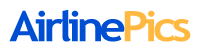
<style>
.page{position:relative;width:212px;height:50px;background:#ffffff}
.page>*{position:absolute;margin:0}
.t1{font:42px "TrebuchetMS-Bold";letter-spacing:-0.1em;color:#004fd2;scale:1.1 1}
.t2{font:42px "TrebuchetMS-Bold";letter-spacing:-0.1em;color:#ffb940;scale:1.1 1}
</style>
<div class="page">
<p class="t1" style="left:9px;top:9px;width:182px;height:33px">Airline<span class="t2">Pics</span></p>
</div>
